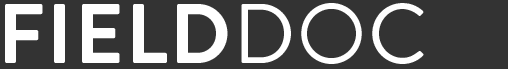
<style>
.page{position:relative;width:508px;height:69px;background:#333333}
.page>*{position:absolute;margin:0}
.t1{font:84px "BrandonGrotesque-Bold";letter-spacing:0.02em;color:#ffffff}
.t2{font:84px "BrandonGrotesque-Regular";letter-spacing:0.02em;color:#ffffff}
</style>
<div class="page">
<p class="t1" style="left:5px;top:3px;width:419px;height:61px">FIELD<span class="t2">DOC</span></p>
</div>
